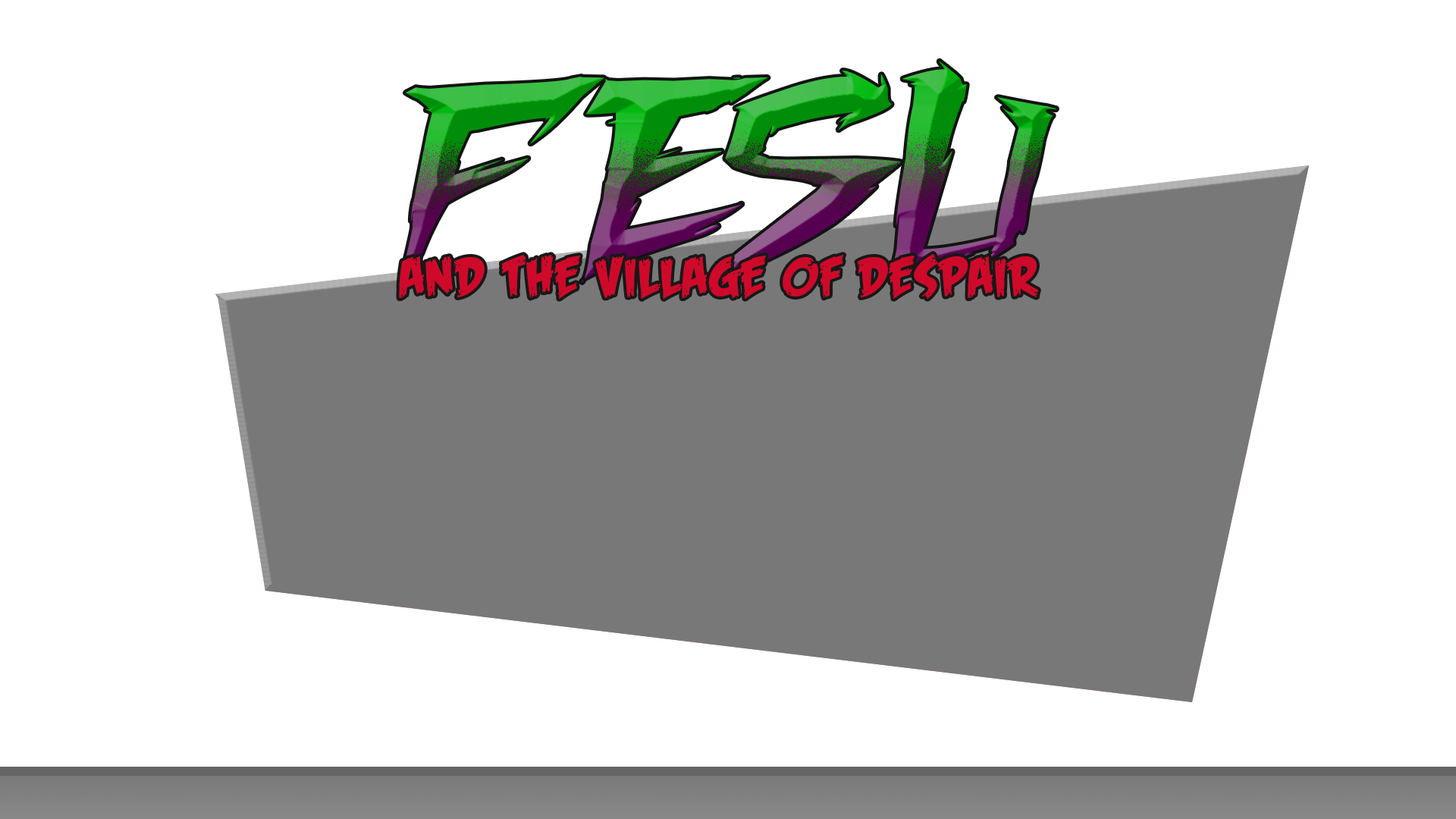
<style>
.page{position:relative;width:1456px;height:819px;background:#ffffff}
.page>*{position:absolute;margin:0}
.t1{font:53.1px "FeastofFleshBB";color:#cf092a}
</style>
<div class="page">
<p class="t1" style="left:399px;top:254px;width:639px;height:45px">AND THE VILLAGE OF DESPAIR</p>
</div>
